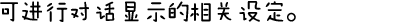
<style>
.page{position:relative;width:393px;height:23px;background:#ffffff}
.page>*{position:absolute;margin:0}
.t1{font:26px "¢è?";color:#000000}
</style>
<div class="page">
<p class="t1" style="left:0px;top:1px;width:296px;height:21px">可进行对话显示的相关设定。</p>
</div>
